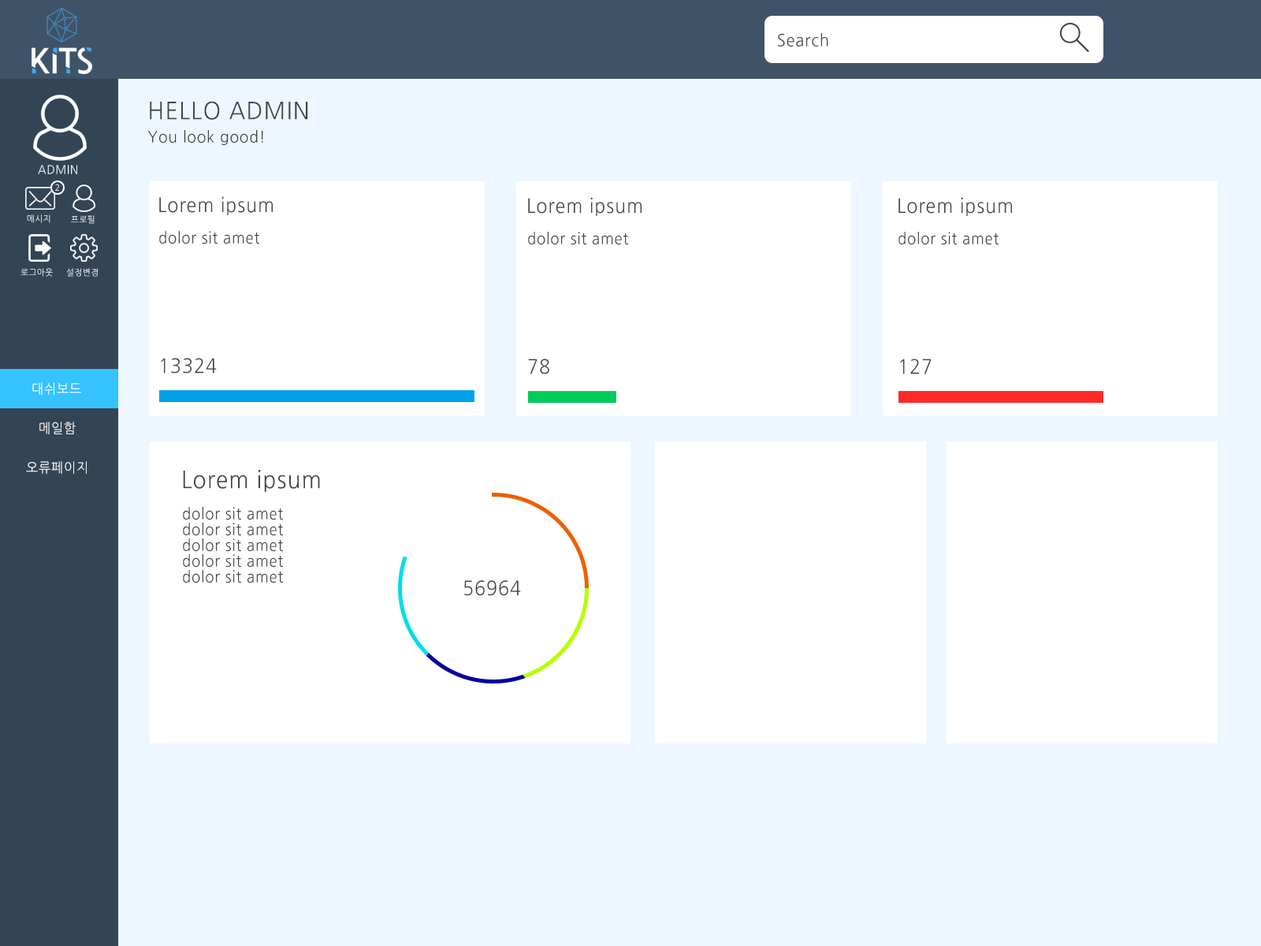
<style>
.page{position:relative;width:1261px;height:946px;background:#ffffff}
.page>*{position:absolute;margin:0}
.t1{font:16.5px "NanumGothic";letter-spacing:0.04em;color:#444444;scale:0.96 1}
.t2{font:23.6px "NanumGothic";letter-spacing:0.04em;color:#444444;scale:0.96 1}
.t3{font:15.8px "NanumGothic";letter-spacing:0.04em;color:#444444;scale:0.96 1}
.t4{font:11.8px "NanumGothic";letter-spacing:0.04em;color:#eef7ff;scale:0.96 1}
.t5{font:8.7px "NanumGothic";letter-spacing:0.04em;color:#ffffff;scale:0.93 1}
.t6{font:19.7px "NanumGothic";letter-spacing:0.04em;color:#444444;scale:0.93 1}
.t7{font:8.7px "NanumGothic";letter-spacing:0.04em;color:#eef7ff;scale:0.96 1}
.t8{font:15.8px "NanumGothic";letter-spacing:0.04em;color:#444444;scale:0.93 1}
.t9{font:8.7px "NanumGothic";letter-spacing:0.04em;scale:0.96 1}
.t10{font:13.4px "NanumGothic";letter-spacing:0.04em;color:#ffffff;scale:0.96 1}
.t11{font:23.6px "NanumGothic";letter-spacing:0.04em;color:#444444;scale:0.93 1}
</style>
<div class="page">
<p class="t1" style="left:778px;top:33px;width:50px;height:13px">Search</p>
<p class="t2" style="left:150px;top:101px;width:158px;height:19px">HELLO ADMIN</p>
<p class="t3" style="left:147px;top:130px;width:116px;height:15px">You look good!</p>
<p class="t4" style="left:38px;top:165px;width:39px;height:9px">ADMIN</p>
<p class="t5" style="left:55px;top:184px;width:4px;height:7px">2</p>
<p class="t6" style="left:159px;top:196px;width:114px;height:19px">Lorem ipsum</p>
<p class="t6" style="left:528px;top:197px;width:113px;height:19px">Lorem ipsum</p>
<p class="t6" style="left:898px;top:197px;width:114px;height:19px">Lorem ipsum</p>
<p class="t7" style="left:27px;top:214px;width:23px;height:9px">메시지</p>
<p class="t7" style="left:71px;top:215px;width:24px;height:9px">프로필</p>
<p class="t8" style="left:159px;top:231px;width:100px;height:13px">dolor sit amet</p>
<p class="t8" style="left:528px;top:232px;width:100px;height:13px">dolor sit amet</p>
<p class="t8" style="left:898px;top:232px;width:100px;height:13px">dolor sit amet</p>
<p class="t9" style="left:20px;top:268px;width:33px;height:9px">로그아웃</p>
<p class="t7" style="left:66px;top:268px;width:32px;height:9px">설정변경</p>
<p class="t6" style="left:161px;top:358px;width:56px;height:16px">13324</p>
<p class="t6" style="left:528px;top:359px;width:21px;height:15px">78</p>
<p class="t6" style="left:900px;top:359px;width:32px;height:15px">127</p>
<p class="t10" style="left:32px;top:382px;width:49px;height:13px">대쉬보드</p>
<p class="t10" style="left:39px;top:422px;width:37px;height:12px">메일함</p>
<p class="t10" style="left:26px;top:461px;width:61px;height:13px">오류페이지</p>
<p class="t11" style="left:183px;top:470px;width:137px;height:22px">Lorem ipsum</p>
<p class="t8" style="left:183px;top:507px;width:100px;height:13px">dolor sit amet</p>
<p class="t8" style="left:183px;top:522px;width:100px;height:14px">dolor sit amet</p>
<p class="t8" style="left:183px;top:538px;width:100px;height:14px">dolor sit amet</p>
<p class="t8" style="left:183px;top:554px;width:100px;height:13px">dolor sit amet</p>
<p class="t8" style="left:183px;top:570px;width:100px;height:13px">dolor sit amet</p>
<p class="t6" style="left:464px;top:580px;width:57px;height:16px">56964</p>
</div>
